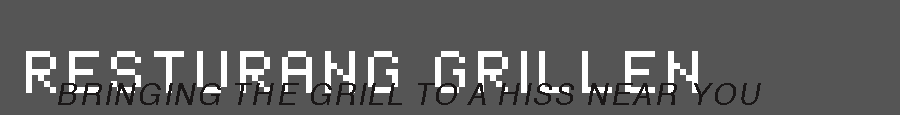
<style>
.page{position:relative;width:900px;height:115px;background:#555555}
.page>*{position:absolute;margin:0}
.t1{font:96px "haxrcorpttf";letter-spacing:0.07em;color:#ffffff;text-transform:uppercase}
.t2{font:30px "Helvetica";letter-spacing:0.07em;color:#1a1717;text-transform:uppercase;font-style:italic}
</style>
<div class="page">
<p class="t1" style="left:26px;top:51px;width:672px;height:42px">Resturang Grillen</p>
<p class="t2" style="left:58px;top:83px;width:703px;height:22px">bringing the Grill to a hiss near you</p>
</div>
